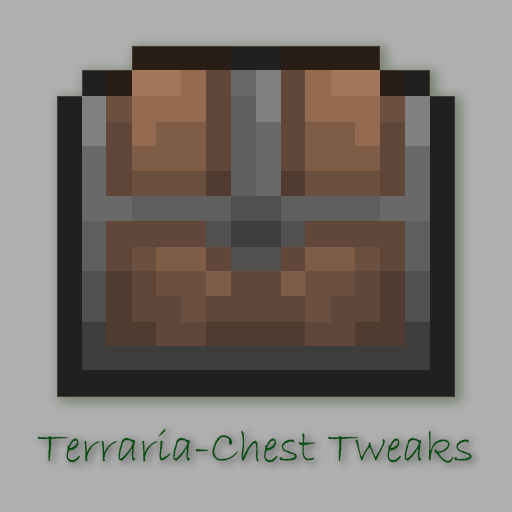
<style>
.page{position:relative;width:512px;height:512px;background:#afafaf}
.page>*{position:absolute;margin:0}
.t1{font:46.7px "BradleyHandITC";color:#1b4b0a}
</style>
<div class="page">
<p class="t1" style="left:37px;top:429px;width:435px;height:34px">Terraria-Chest Tweaks</p>
</div>
